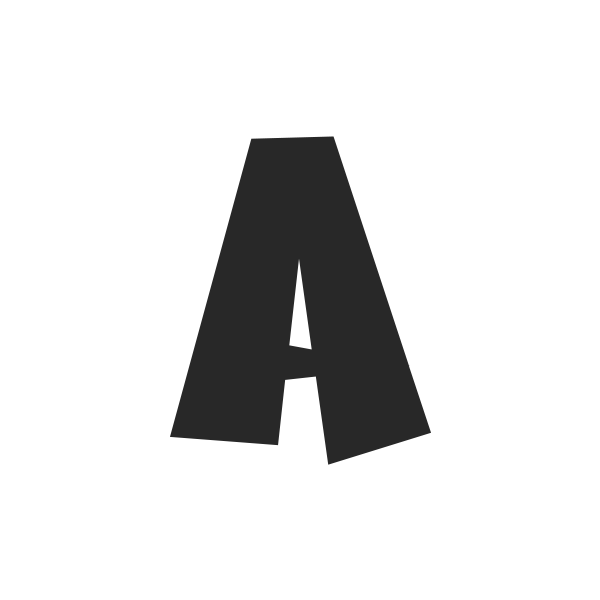
<style>
.page{position:relative;width:600px;height:600px;background:#ffffff}
.page>*{position:absolute;margin:0}
.t1{font:375px "SugarBomb";color:#282828}
</style>
<div class="page">
<p class="t1" style="left:170px;top:136px;width:261px;height:329px">A</p>
</div>
